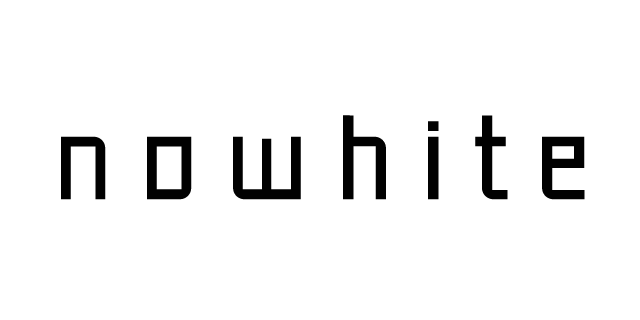
<style>
.page{position:relative;width:640px;height:320px;background:#ffffff}
.page>*{position:absolute;margin:0}
.t1{font:126.4px "Makinas-Scrap-5";letter-spacing:0.22em;color:#010101}
</style>
<div class="page">
<p class="t1" style="left:61px;top:115px;width:524px;height:85px">nowhite</p>
</div>
